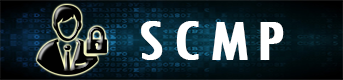
<style>
.page{position:relative;width:343px;height:80px}
.page>*{position:absolute;margin:0}
.t1{font:59.9px "TwCenMT-Condensed";letter-spacing:0.1em;color:#ffffff;font-weight:bold;scale:1.25 1}
</style>
<div class="page">
<p class="t1" style="left:141px;top:21px;width:143px;height:39px">SCMP</p>
</div>
